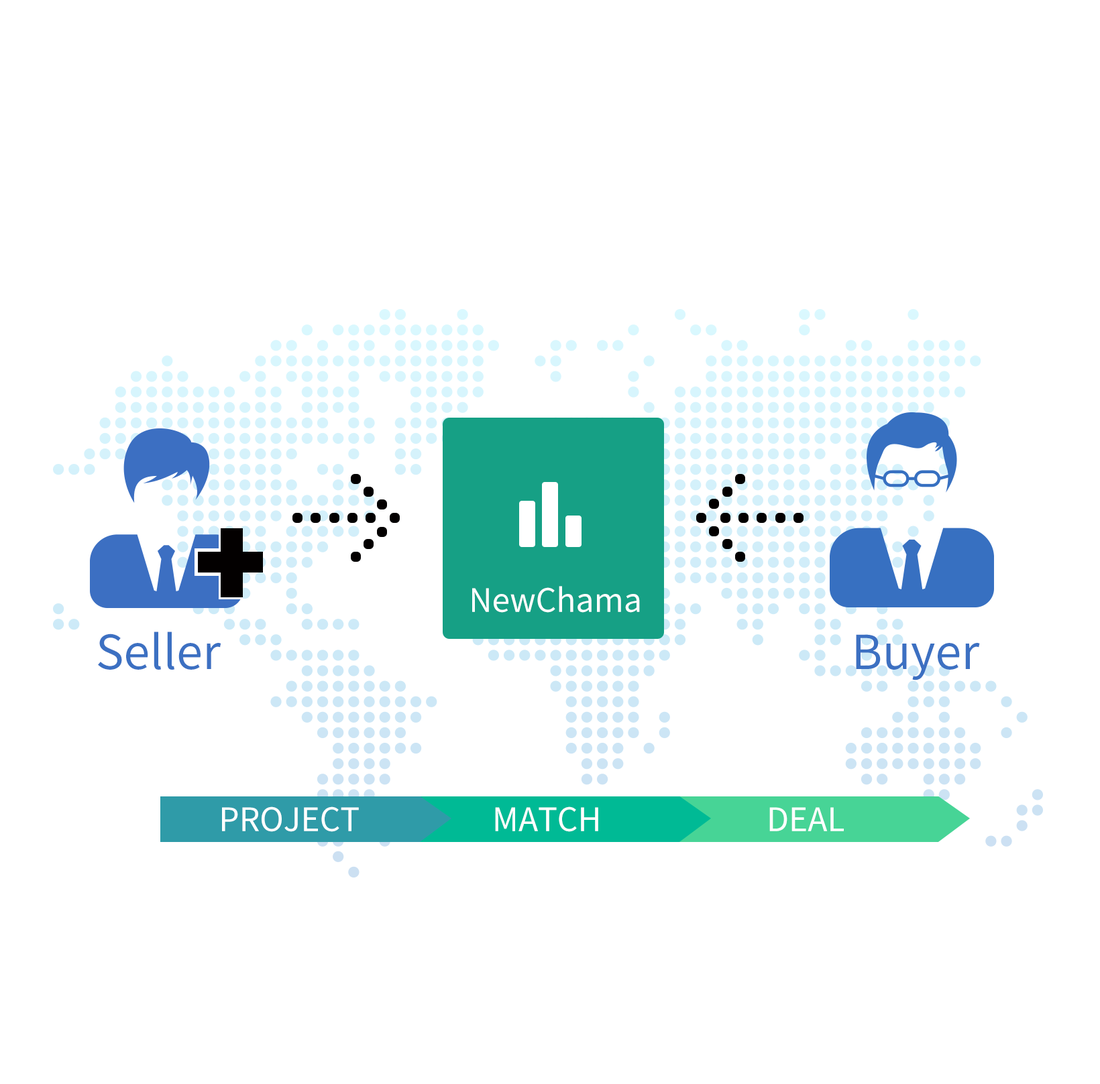
<style>
.page{position:relative;width:1100px;height:1084px;background:#ffffff}
.page>*{position:absolute;margin:0}
.t1{font:32.2px "SourceHanSansCN-Regular";color:#ffffff}
.t2{font:46.9px "SourceHanSansCN-Regular";color:#3c70c2}
</style>
<div class="page">
<p class="t1" style="left:472px;top:586px;width:168px;height:27px">NewChama</p>
<p class="t2" style="left:98px;top:632px;width:123px;height:38px">Seller</p>
<p class="t2" style="left:856px;top:634px;width:124px;height:47px">Buyer</p>
<p class="t1" style="left:222px;top:807px;width:137px;height:25px">PROJECT</p>
<p class="t1" style="left:495px;top:807px;width:103px;height:25px">MATCH</p>
<p class="t1" style="left:769px;top:807px;width:75px;height:24px">DEAL</p>
</div>
